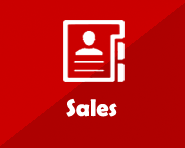
<style>
.page{position:relative;width:185px;height:148px}
.page>*{position:absolute;margin:0}
.t1{font:24px "BerlinSansFBDemi-Bold";color:#ffffff}
</style>
<div class="page">
<p class="t1" style="left:66px;top:98px;width:51px;height:19px">Sales</p>
</div>
